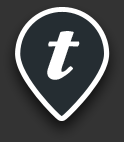
<style>
.page{position:relative;width:124px;height:142px;background:#333333}
.page>*{position:absolute;margin:0}
.t1{font:84px "HoeflerText-BlackItalic";color:#ffffff}
</style>
<div class="page">
<p class="t1" style="left:47px;top:31px;width:33px;height:49px">t</p>
</div>
